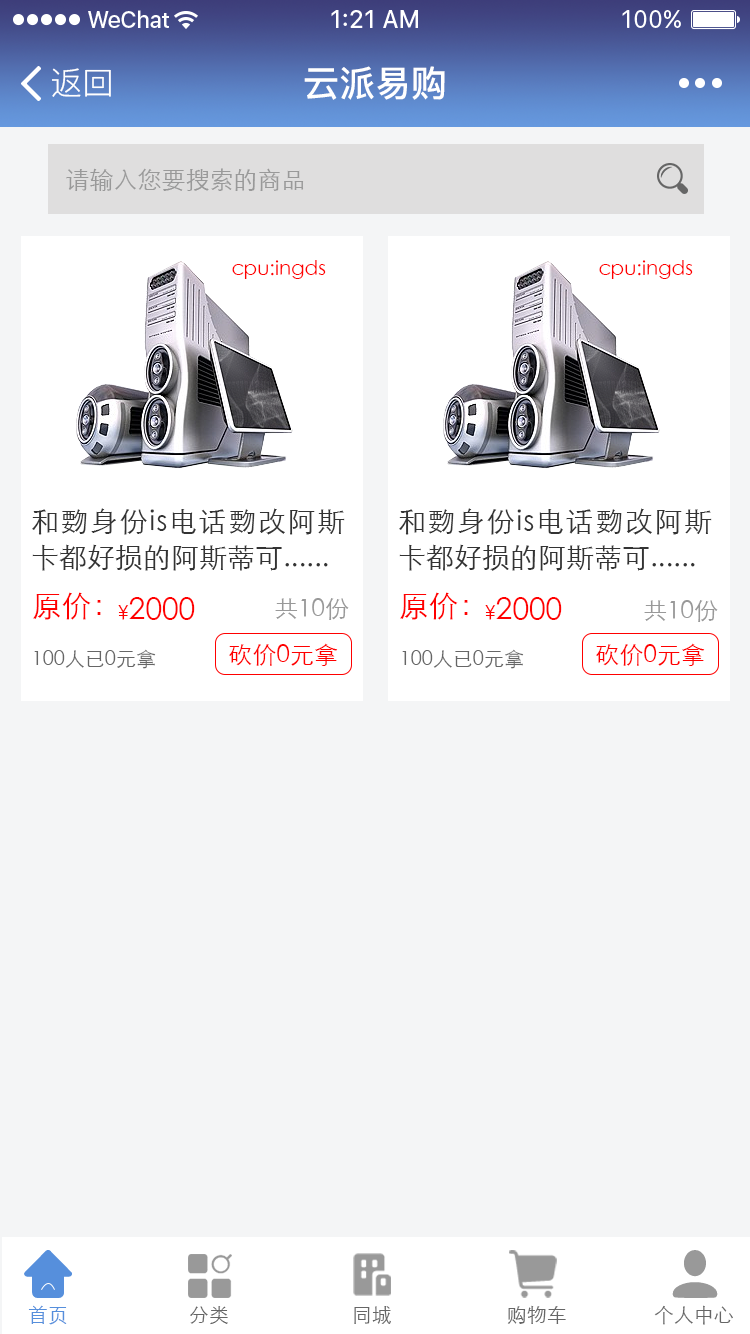
<style>
.page{position:relative;width:750px;height:1334px;background:#f4f5f6}
.page>*{position:absolute;margin:0}
.t1{font:32px "PingFang-SC-Regular";color:#ffffff}
.t2{font:36px "PingFang-SC-Bold";color:#ffffff}
.t3{font:24px "STXihei";color:#999999}
.t4{font:20px "STXihei";color:#ff0000}
.t5{font:28px/36px "STXihei";color:#333333}
.t6{font:30px "STXihei";color:#ff0000}
.t7{font:20px "STXihei";color:#666666}
.t8{font:24px "STXihei";color:#ff0000}
.t9{font:20px "STXihei";color:#568fdc}
</style>
<div class="page">
<p class="t1" style="left:52px;top:68px;width:59px;height:29px">返回</p>
<p class="t2" style="left:304px;top:66px;width:141px;height:34px">云派易购</p>
<p class="t3" style="left:66px;top:168px;width:238px;height:23px">请输入您要搜索的商品</p>
<p class="t4" style="left:232px;top:260px;width:94px;height:19px">cpu:ingds</p>
<p class="t4" style="left:599px;top:260px;width:94px;height:19px">cpu:ingds</p>
<p class="t5" style="left:32px;top:508px;width:313px;height:63px;text-align:justify">和覅身份is电话覅改阿斯卡都好损的阿斯蒂可......</p>
<p class="t5" style="left:399px;top:508px;width:313px;height:63px;text-align:justify">和覅身份is电话覅改阿斯卡都好损的阿斯蒂可......</p>
<p class="t6" style="left:33px;top:592px;width:68px;height:28px">原价：</p>
<p class="t6" style="left:400px;top:592px;width:68px;height:28px">原价：</p>
<p class="t6" style="left:118px;top:597px;width:77px;height:23px"><span class="t4">¥</span>2000</p>
<p class="t3" style="left:275px;top:598px;width:74px;height:22px">共10份</p>
<p class="t6" style="left:485px;top:597px;width:77px;height:23px"><span class="t4">¥</span>2000</p>
<p class="t3" style="left:644px;top:600px;width:74px;height:22px">共10份</p>
<p class="t7" style="left:34px;top:649px;width:122px;height:20px">100人已0元拿</p>
<p class="t8" style="left:229px;top:643px;width:109px;height:23px">砍价0元拿</p>
<p class="t7" style="left:402px;top:649px;width:122px;height:20px">100人已0元拿</p>
<p class="t8" style="left:596px;top:643px;width:109px;height:23px">砍价0元拿</p>
<p class="t9" style="left:28px;top:1305px;width:39px;height:20px">首页</p>
<p class="t7" style="left:190px;top:1306px;width:38px;height:19px">分类</p>
<p class="t7" style="left:354px;top:1306px;width:37px;height:18px">同城</p>
<p class="t7" style="left:507px;top:1305px;width:59px;height:19px">购物车</p>
<p class="t7" style="left:654px;top:1305px;width:79px;height:20px">个人中心</p>
</div>
